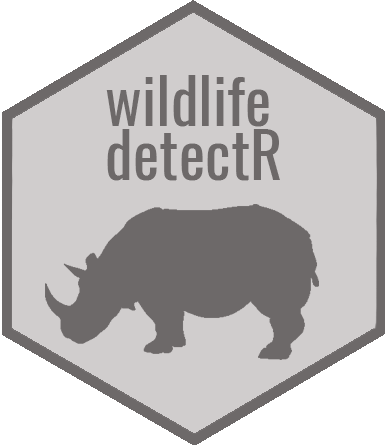
<style>
.page{position:relative;width:385px;height:445px;background:#d0cdcd}
.page>*{position:absolute;margin:0}
.t1{font:62.5px/54.2px "Oswald-Regular";color:#6d6969}
</style>
<div class="page">
<p class="t1" style="left:106px;top:75px;width:174px;height:106px">wildlife<br>detectR</p>
</div>
